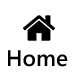
<style>
.page{position:relative;width:80px;height:82px;background:#ffffff}
.page>*{position:absolute;margin:0}
.t1{font:22.5px "YuGothicUI-Semibold";color:#000000}
</style>
<div class="page">
<p class="t1" style="left:8px;top:50px;width:60px;height:17px">Home</p>
</div>
